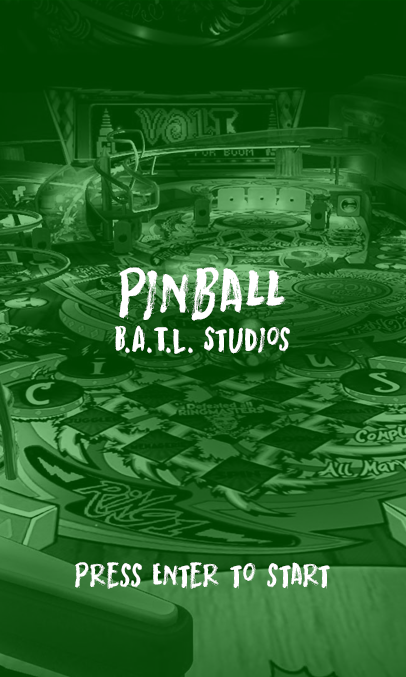
<style>
.page{position:relative;width:406px;height:677px}
.page>*{position:absolute;margin:0}
.t1{font:72px "MortalCoilDEMO-Regular";color:#ffffff}
.t2{font:36px "MortalCoilDEMO-Regular";color:#ffffff}
</style>
<div class="page">
<p class="t1" style="left:119px;top:267px;width:167px;height:54px">Pinball</p>
<p class="t2" style="left:115px;top:325px;width:175px;height:29px">B.A.T.L. Studios</p>
<p class="t2" style="left:75px;top:562px;width:255px;height:27px">Press Enter to start</p>
</div>
